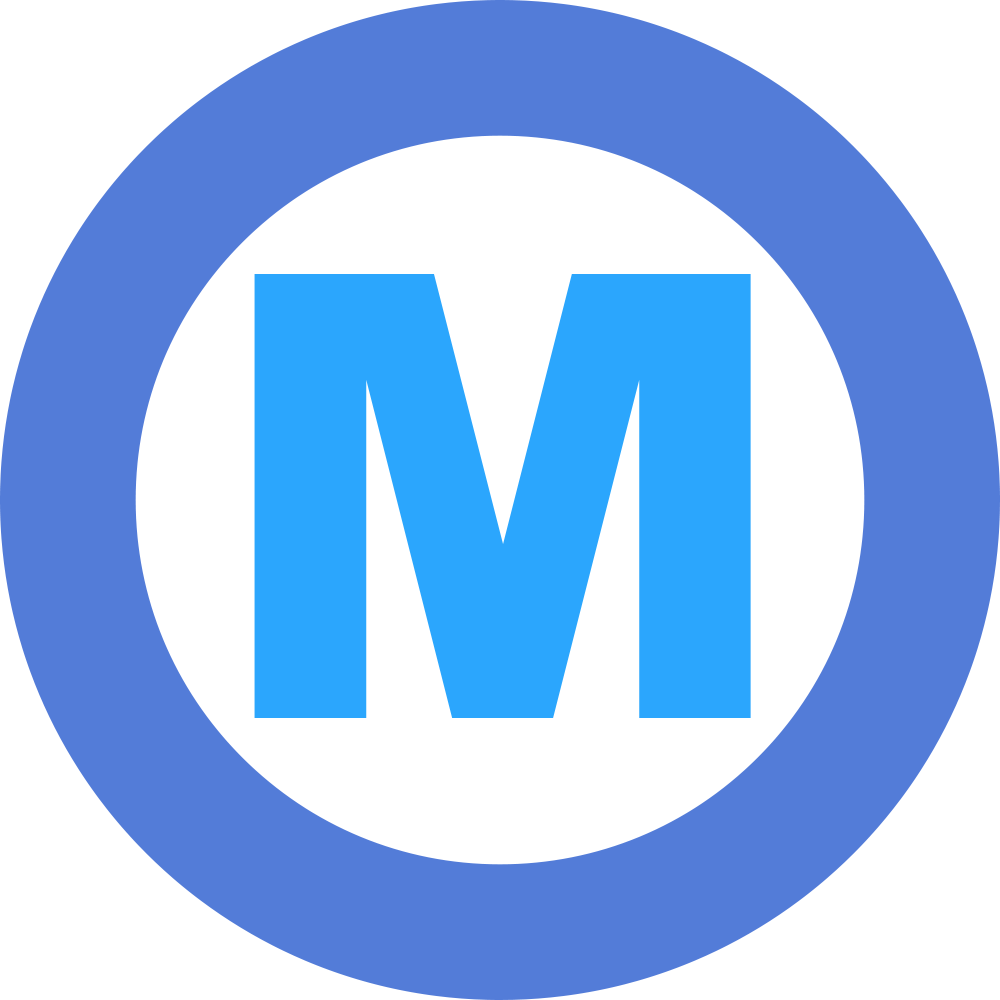
<style>
.page{position:relative;width:1000px;height:1000px;background:#ffffff}
.page>*{position:absolute;margin:0}
.t1{font:619.5px "Arial-Black";letter-spacing:0.08em;color:#2ba6fd}
</style>
<div class="page">
<p class="t1" style="left:254px;top:274px;width:497px;height:444px">M</p>
</div>
